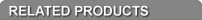
<style>
.page{position:relative;width:202px;height:20px;background:#858585}
.page>*{position:absolute;margin:0}
.t1{font:13.3px "Arial-BoldMT";color:#ffffff}
</style>
<div class="page">
<p class="t1" style="left:9px;top:5px;width:139px;height:11px">RELATED PRODUCTS</p>
</div>
